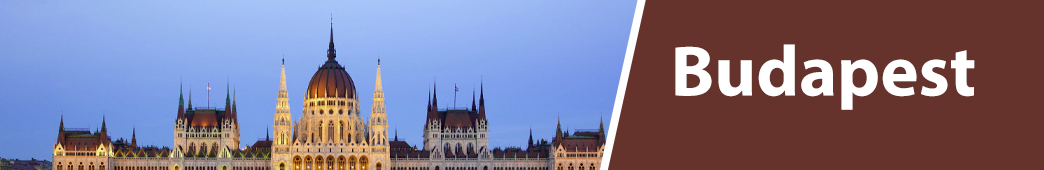
<style>
.page{position:relative;width:1044px;height:170px;background:#66332c}
.page>*{position:absolute;margin:0}
.t1{font:72px "MyriadPro-Bold";color:#ffffff}
</style>
<div class="page">
<p class="t1" style="left:675px;top:44px;width:300px;height:66px">Budapest</p>
</div>
